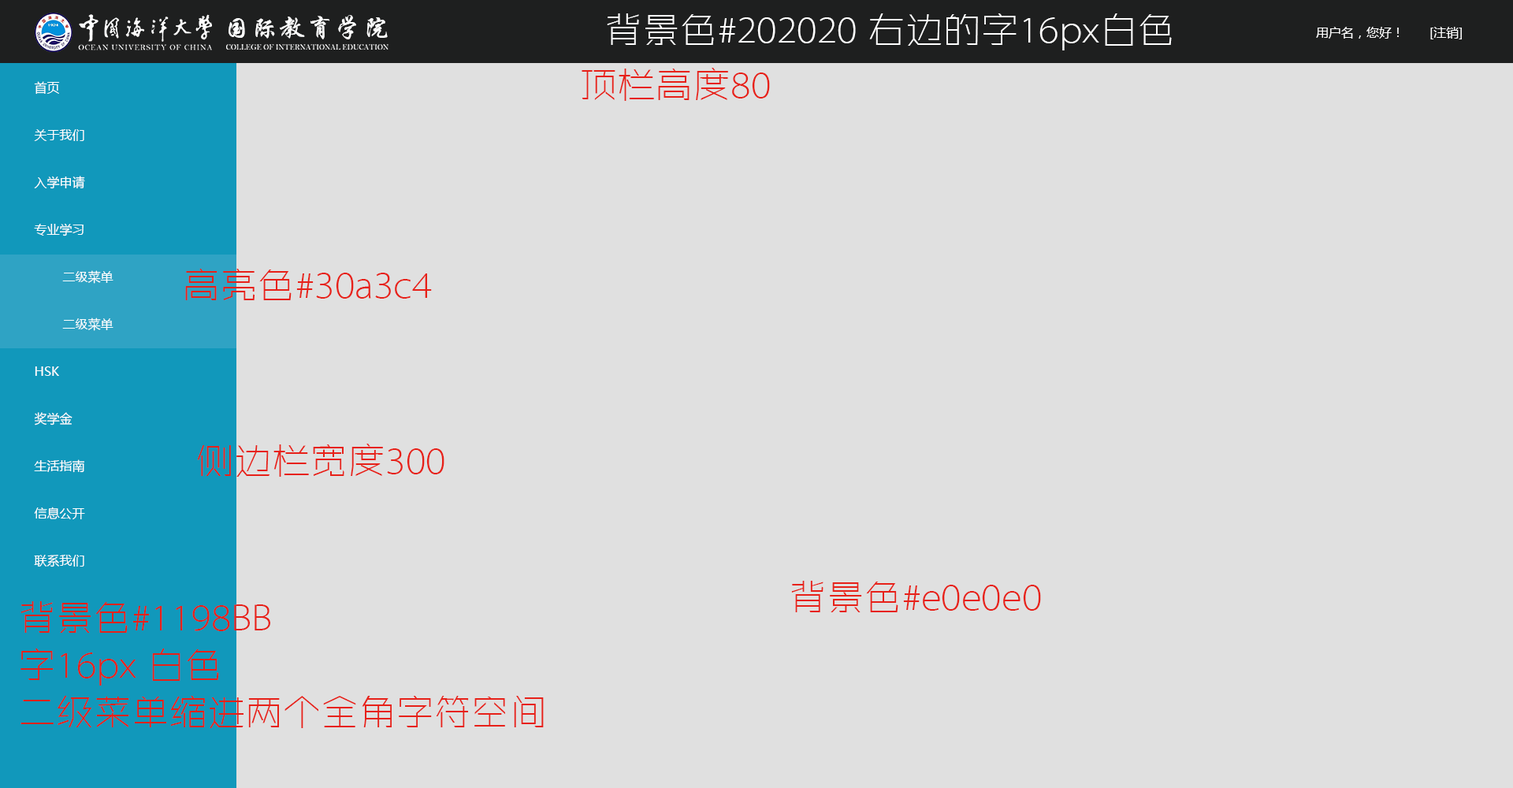
<style>
.page{position:relative;width:1513px;height:788px;background:#e0e0e0}
.page>*{position:absolute;margin:0}
.t1{font:26px "STXingkai";letter-spacing:0.075em;color:#ffffff}
.t2{font:37.8px "ZHSRXT--GBK1-0";color:#ffffff}
.t3{font:12.6px "MicrosoftYaHei";color:#ffffff}
.t4{font:37.8px "ZHSRXT--GBK1-0";color:#e72119}
.t5{font:12.6px/47.3px "MicrosoftYaHei"}
.t6{font:12.6px/47.3px "MicrosoftYaHei";color:#ffffff}
.t7{font:37.8px/47.3px "ZHSRXT--GBK1-0";color:#e72119}
</style>
<div class="page">
<p class="t1" style="left:229px;top:15px;width:159px;height:24px">国际教育学院</p>
<p class="t2" style="left:607px;top:13px;width:565px;height:37px">背景色#202020 右边的字16px白色</p>
<p class="t3" style="left:1316px;top:27px;width:146px;height:12px">用户名，您好！　　[注销]</p>
<p class="t4" style="left:582px;top:68px;width:188px;height:33px">顶栏高度80</p>
<p class="t5" style="left:34px;top:81px;width:51px;height:392px">首页<br>关于我们<br>入学申请<br>专业学习<br>HSK<br>奖学金<br>生活指南<br>信息公开<br>联系我们</p>
<p class="t6" style="left:34px;top:81px;width:79px;height:486px">首页<br>关于我们<br>入学申请<br>专业学习<br> 二级菜单<br> 二级菜单<br>HSK<br>奖学金<br>生活指南<br>信息公开<br>联系我们</p>
<p class="t4" style="left:185px;top:269px;width:247px;height:31px">高亮色#30a3c4</p>
<p class="t4" style="left:197px;top:444px;width:247px;height:33px">侧边栏宽度300</p>
<p class="t4" style="left:791px;top:581px;width:250px;height:31px">背景色#e0e0e0</p>
<p class="t7" style="left:20px;top:601px;width:524px;height:127px">背景色#1198BB<br>字16px 白色<br>二级菜单缩进两个全角字符空间</p>
</div>
